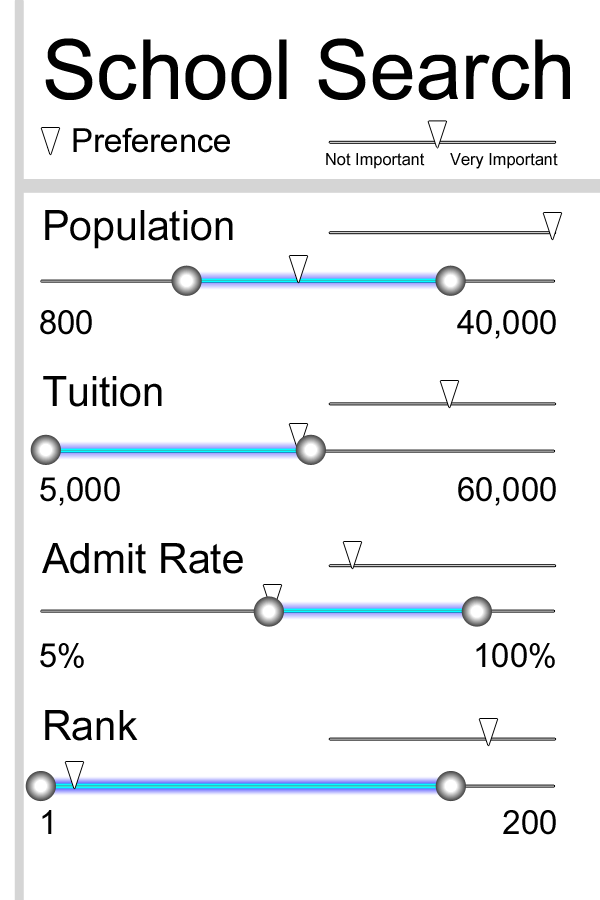
<style>
.page{position:relative;width:600px;height:900px;background:#ffffff}
.page>*{position:absolute;margin:0}
.t1{font:83.3px "ArialNarrow";color:#000000;scale:1.2 1}
.t2{font:33.3px "ArialNarrow";color:#000000;scale:1.2 1}
.t3{font:16.7px "ArialNarrow";color:#000000;scale:1.2 1}
.t4{font:41.7px/166.7px "ArialNarrow";color:#000000;scale:1.2 1}
.t5{font:33.3px/166.7px "ArialNarrow";color:#000000;scale:1.2 1}
</style>
<div class="page">
<p class="t1" style="left:45px;top:38px;width:525px;height:62px">School Search</p>
<p class="t2" style="left:73px;top:128px;width:157px;height:25px">Preference</p>
<p class="t3" style="left:326px;top:153px;width:99px;height:16px">Not Important</p>
<p class="t3" style="left:450px;top:153px;width:108px;height:16px">Very Important</p>
<p class="t4" style="left:42px;top:210px;width:201px;height:531px">Population<br>Tuition<br>Admit Rate<br>Rank</p>
<p class="t5" style="left:40px;top:310px;width:80px;height:524px">800<br>5,000<br>5%<br>1</p>
<p class="t5" style="left:457px;top:310px;width:99px;height:525px;text-align:right">40,000<br>60,000<br>100%<br>200</p>
</div>
